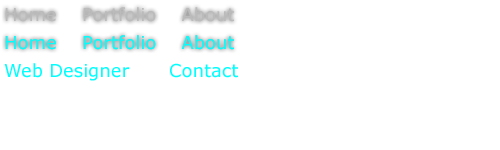
<style>
.page{position:relative;width:500px;height:150px;background:#ffffff}
.page>*{position:absolute;margin:0}
.t1{font:18px "Verdana";color:#bbbbbb}
.t2{font:18px "Verdana";color:#00ffff}
</style>
<div class="page">
<p class="t1" style="left:5px;top:7px;width:229px;height:15px">Home    Portfolio    About</p>
<p class="t2" style="left:5px;top:35px;width:229px;height:15px">Home    Portfolio    About</p>
<p class="t2" style="left:5px;top:35px;width:229px;height:15px">Home    Portfolio    About</p>
<p class="t2" style="left:4px;top:63px;width:126px;height:18px">Web Designer</p>
<p class="t2" style="left:170px;top:63px;width:68px;height:15px">Contact</p>
</div>
